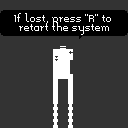
<style>
.page{position:relative;width:128px;height:128px;background:#333333}
.page>*{position:absolute;margin:0}
.t1{font:8px "Memoria";color:#ffffff}
</style>
<div class="page">
<p class="t1" style="left:14px;top:13px;width:97px;height:22px;text-align:center">If lost, press "R" to <br>retart the system</p>
</div>
